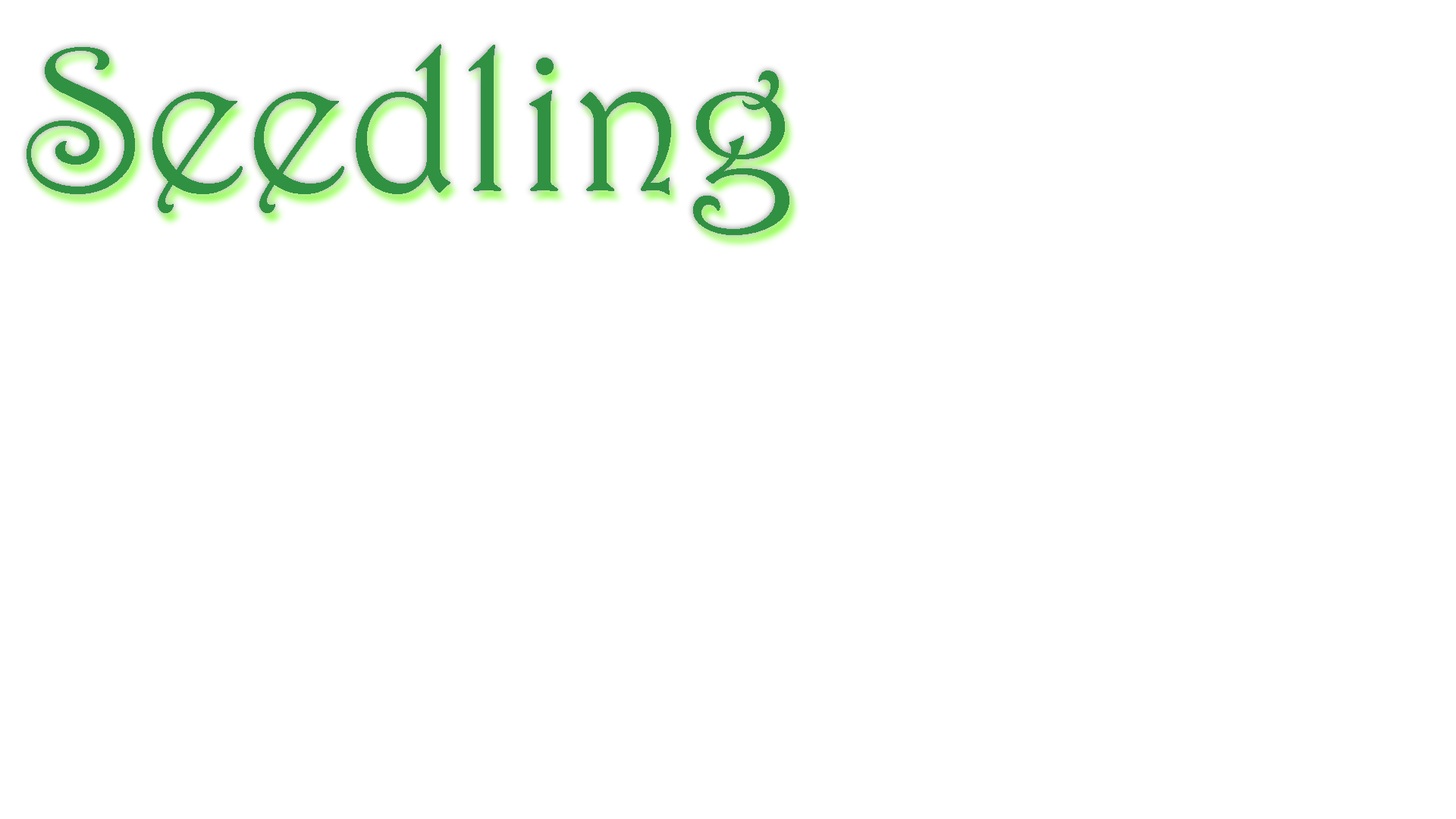
<style>
.page{position:relative;width:1456px;height:819px;background:#ffffff}
.page>*{position:absolute;margin:0}
.t1{font:206.5px "Harrington";color:#309143}
</style>
<div class="page">
<p class="t1" style="left:27px;top:44px;width:762px;height:191px">Seedling</p>
</div>
